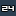
<style>
.page{position:relative;width:16px;height:16px;background:#2c3e50}
.page>*{position:absolute;margin:0}
.t1{font:13.3px "VisitorTT2BRK";letter-spacing:0.02em;color:#ffffff}
</style>
<div class="page">
<p class="t1" style="left:2px;top:6px;width:12px;height:5px">24</p>
</div>
